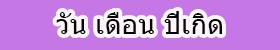
<style>
.page{position:relative;width:280px;height:50px;background:#c577e5}
.page>*{position:absolute;margin:0}
.t1{font:27.8px "Tahoma";color:#09020c}
</style>
<div class="page">
<p class="t1" style="left:56px;top:11px;width:166px;height:23px">วัน เดือน ปีเกิด</p>
</div>
